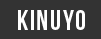
<style>
.page{position:relative;width:101px;height:39px;background:#333333}
.page>*{position:absolute;margin:0}
.t1{font:28px "BebasNeue";letter-spacing:0.05em;color:#ffffff;text-transform:uppercase}
</style>
<div class="page">
<p class="t1" style="left:18px;top:10px;width:67px;height:20px">Kinuyo</p>
</div>
